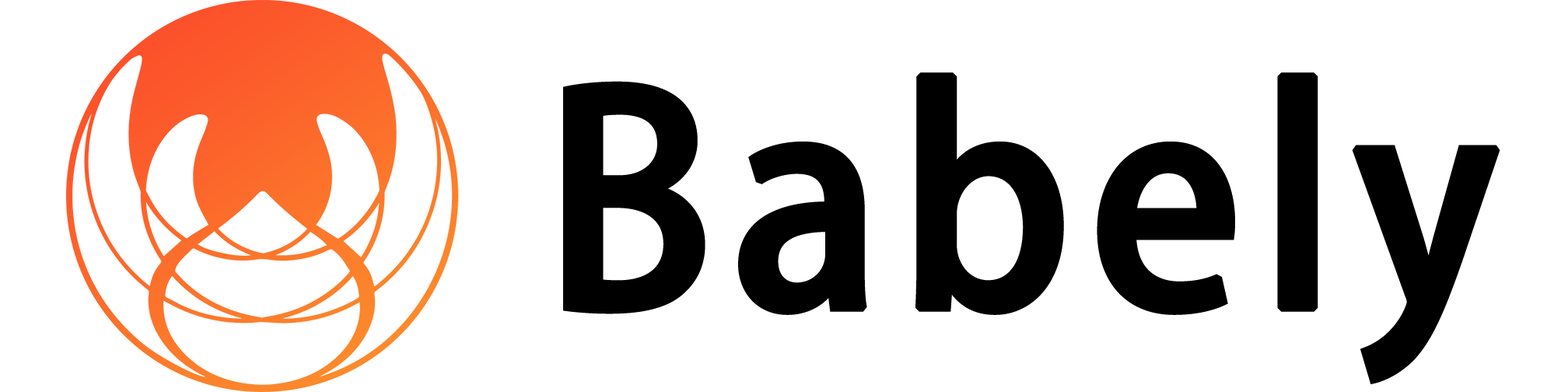
<style>
.page{position:relative;width:1568px;height:392px;background:#ffffff}
.page>*{position:absolute;margin:0}
.t1{font:288.4px "AdobeHeitiStd-Regular";letter-spacing:0.04em;color:#000000;font-weight:bold}
</style>
<div class="page">
<p class="t1" style="left:563px;top:72px;width:937px;height:312px">Babely</p>
</div>
